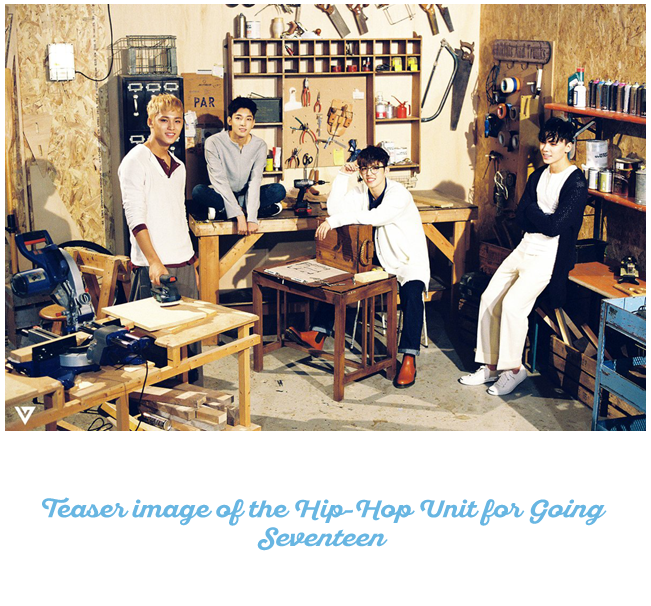
<style>
.page{position:relative;width:651px;height:606px;background:#ffffff}
.page>*{position:absolute;margin:0}
.t1{font:24px "SantEliaScript-BoldDMO";color:#68b6e2;scale:1.1 1}
.t2{font:24px "SansitaOne";color:#68b6e2;scale:1.1 1}
.t3{font:24px "SantEliaScript-BoldDMO";color:#68b6e2;font-style:italic;scale:1.1 1}
</style>
<div class="page">
<p class="t1" style="left:42px;top:497px;width:565px;height:54px;text-align:center">Teaser image of the Hip<span class="t2">-</span>Hop Unit for <span class="t3">Going<br>Seventeen</span></p>
</div>
